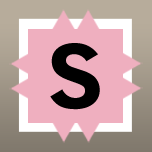
<style>
.page{position:relative;width:152px;height:152px;background:#efafbf}
.page>*{position:absolute;margin:0}
.t1{font:86px "BellGothicStd-Black";color:#000000;scale:1.11 1}
</style>
<div class="page">
<p class="t1" style="left:50px;top:43px;width:50px;height:67px">S</p>
</div>
